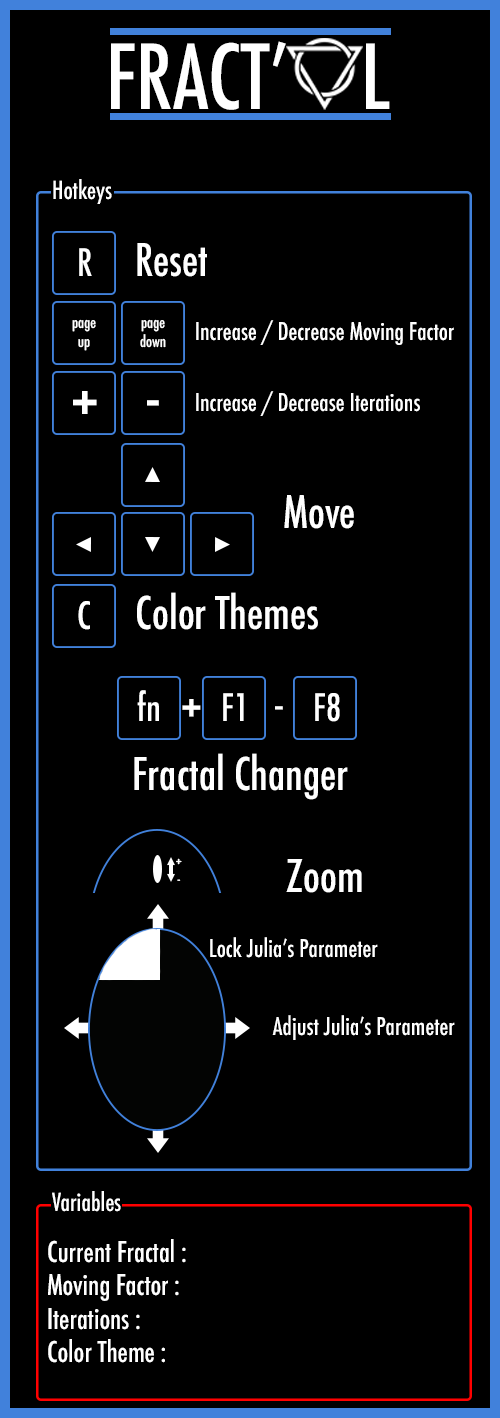
<style>
.page{position:relative;width:500px;height:1418px;background:#000000}
.page>*{position:absolute;margin:0}
.t1{font:86.8px "Futura-CondensedMedium";color:#ffffff}
.t2{font:24.2px "Futura-CondensedMedium";color:#ffffff}
.t3{font:43.7px "Futura-CondensedMedium";color:#ffffff}
.t4{font:36.8px "Futura-CondensedMedium";color:#ffffff}
.t5{font:15.4px "Futura-CondensedMedium";color:#ffffff}
.t6{font:23.8px "Futura-CondensedMedium";color:#ffffff}
.t7{font:66.3px "Futura-CondensedMedium";color:#ffffff}
.t8{font:50.2px "Futura-CondensedMedium";color:#ffffff}
.t9{font:43px "Futura-CondensedMedium";color:#ffffff}
.t10{font:14.3px "Futura-CondensedMedium";color:#ffffff}
.t11{font:27.6px "Futura-CondensedMedium";color:#ffffff}
</style>
<div class="page">
<p class="t1" style="left:111px;top:41px;width:279px;height:69px">FRACT’    L</p>
<p class="t2" style="left:53px;top:179px;width:59px;height:25px">Hotkeys</p>
<p class="t3" style="left:137px;top:243px;width:70px;height:34px">Reset</p>
<p class="t4" style="left:79px;top:248px;width:13px;height:28px">R</p>
<p class="t5" style="left:72px;top:319px;width:24px;height:32px;text-align:center">page<br>up</p>
<p class="t5" style="left:140px;top:319px;width:26px;height:29px;text-align:center">page<br>down</p>
<p class="t6" style="left:196px;top:320px;width:258px;height:25px">Increase / Decrease Moving Factor</p>
<p class="t7" style="left:73px;top:391px;width:24px;height:23px">+</p>
<p class="t7" style="left:147px;top:400px;width:12px;height:6px">-</p>
<p class="t6" style="left:196px;top:391px;width:224px;height:25px">Increase / Decrease Iterations</p>
<p class="t3" style="left:284px;top:495px;width:70px;height:34px">Move</p>
<p class="t3" style="left:137px;top:592px;width:181px;height:38px">Color Themes</p>
<p class="t4" style="left:78px;top:601px;width:12px;height:29px">C</p>
<p class="t4" style="left:137px;top:690px;width:22px;height:31px">fn</p>
<p class="t8" style="left:182px;top:699px;width:19px;height:18px">+</p>
<p class="t4" style="left:223px;top:693px;width:117px;height:29px">F1        F8</p>
<p class="t9" style="left:275px;top:706px;width:8px;height:4px">-</p>
<p class="t3" style="left:134px;top:753px;width:214px;height:47px">Fractal Changer</p>
<p class="t10" style="left:176px;top:858px;width:6px;height:23px;text-align:center">+<br>-</p>
<p class="t3" style="left:286px;top:859px;width:76px;height:34px">Zoom</p>
<p class="t6" style="left:210px;top:937px;width:168px;height:21px">Lock Julia’s Parameter</p>
<p class="t6" style="left:272px;top:1015px;width:183px;height:25px">Adjust Julia’s Parameter</p>
<p class="t2" style="left:52px;top:1191px;width:69px;height:21px">Variables</p>
<p class="t11" style="left:48px;top:1239px;width:138px;height:124px">Current Fractal :<br>Moving Factor :<br>Iterations :<br>Color Theme :</p>
</div>
